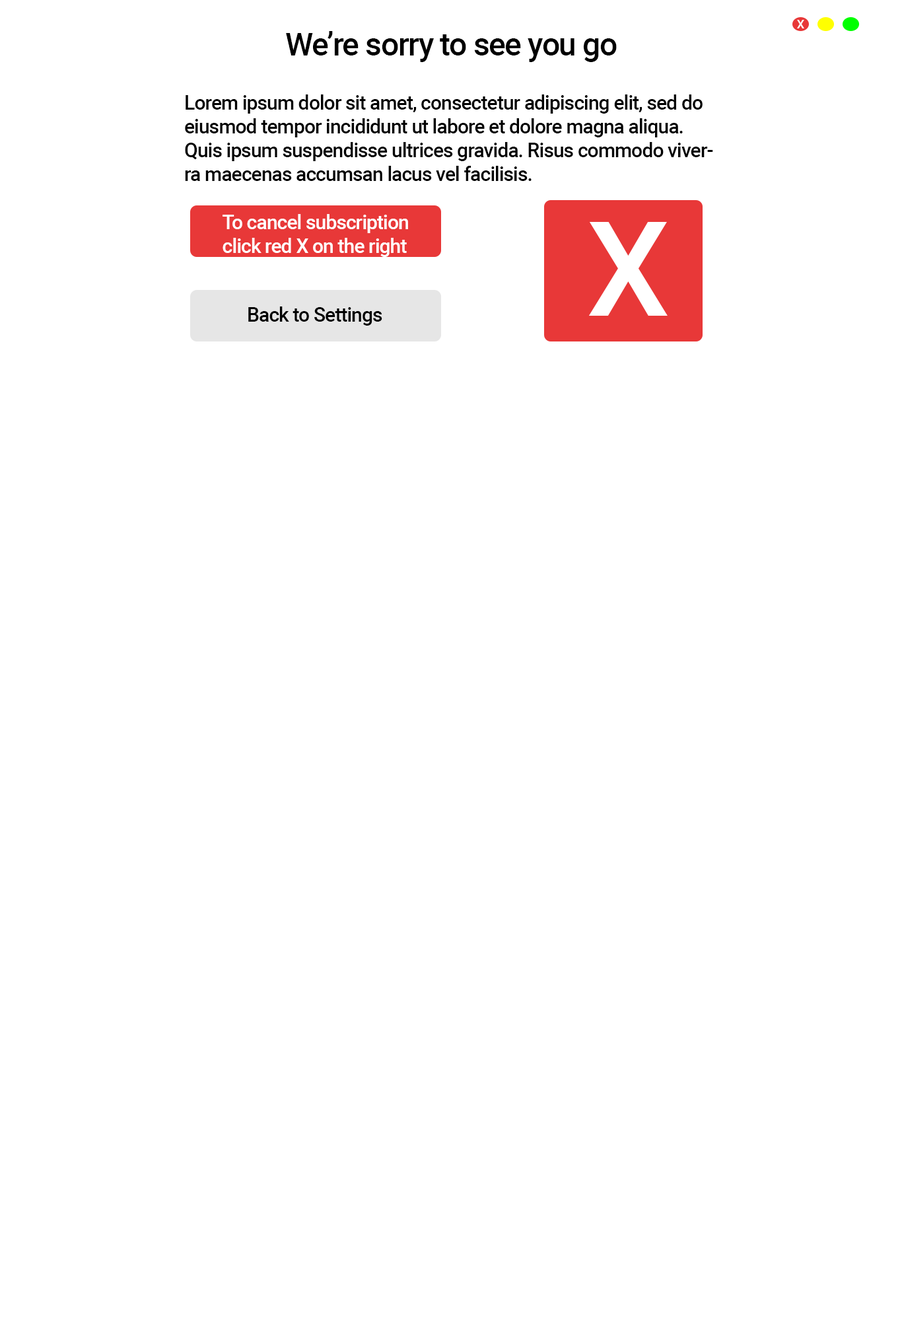
<style>
.page{position:relative;width:902px;height:1321px;background:#ffffff}
.page>*{position:absolute;margin:0}
.t1{font:11.9px "Roboto-Medium";letter-spacing:-0.03em;color:#ffffff}
.t2{font:31.7px "Roboto-Medium";letter-spacing:-0.03em;color:#000000}
.t3{font:19.8px "Roboto-Medium";letter-spacing:-0.03em;color:#000000}
.t4{font:19.8px "Roboto-Medium";letter-spacing:-0.03em;color:#ffffff}
.t5{font:132.1px "Roboto-Medium";letter-spacing:-0.03em;color:#ffffff}
</style>
<div class="page">
<p class="t1" style="left:797px;top:20px;width:8px;height:8px">X</p>
<p class="t2" style="left:286px;top:31px;width:331px;height:31px">We’re sorry to see you go</p>
<p class="t3" style="left:185px;top:94px;width:529px;height:87px">Lorem ipsum dolor sit amet, consectetur adipiscing elit, sed do eiusmod tempor incididunt ut labore et dolore magna aliqua. Quis ipsum suspendisse ultrices gravida. Risus commodo viverra maecenas accumsan lacus vel facilisis.</p>
<p class="t4" style="left:223px;top:214px;width:185px;height:43px">To cancel subscription <br>click red X on the right</p>
<p class="t5" style="left:589px;top:222px;width:79px;height:94px">X</p>
<p class="t3" style="left:248px;top:307px;width:135px;height:19px">Back to Settings</p>
</div>
